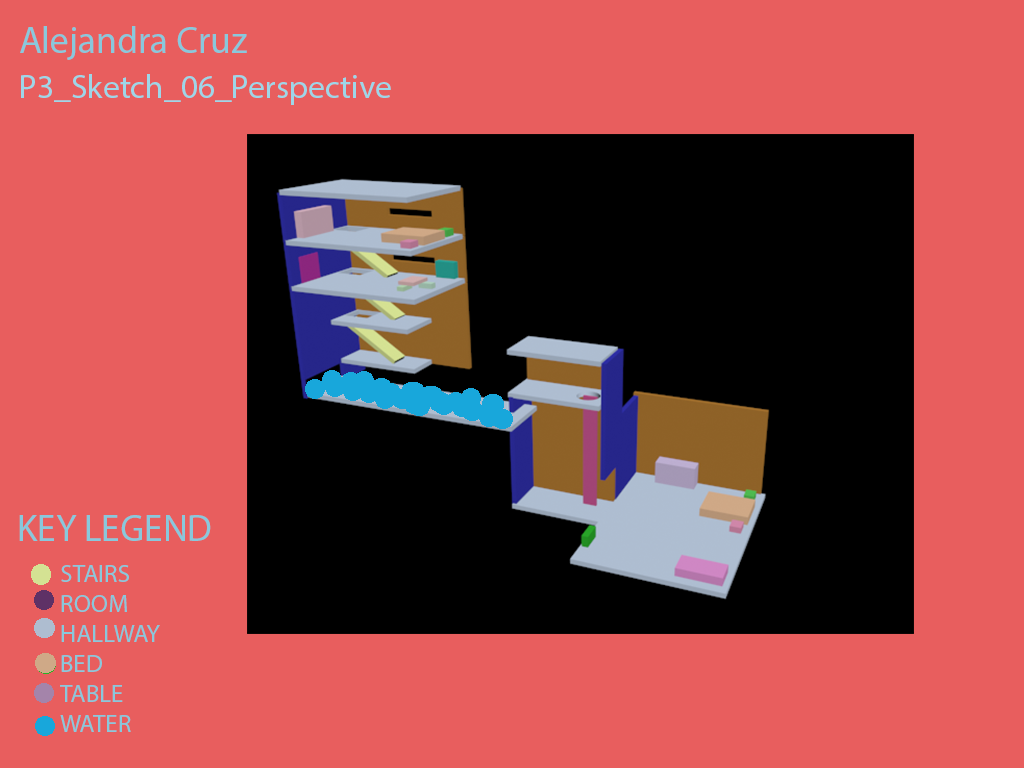
<style>
.page{position:relative;width:1024px;height:768px;background:#e85e5e}
.page>*{position:absolute;margin:0}
.t1{font:37.5px "MyriadPro-Regular";color:#89c8dc}
.t2{font:33.3px "MyriadPro-Regular";color:#9ed6e8}
.t3{font:25px "MyriadPro-Regular";color:#89c8dc}
</style>
<div class="page">
<p class="t1" style="left:20px;top:26px;width:227px;height:34px">Alejandra Cruz</p>
<p class="t2" style="left:21px;top:74px;width:370px;height:31px">P3_Sketch_06_Perspective</p>
<p class="t1" style="left:19px;top:515px;width:192px;height:26px">KEY LEGEND</p>
<p class="t3" style="left:60px;top:565px;width:100px;height:167px">STAIRS<br>ROOM<br>HALLWAY<br>BED<br>TABLE<br>WATER</p>
</div>
